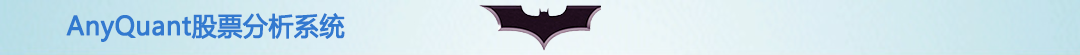
<style>
.page{position:relative;width:1080px;height:55px}
.page>*{position:absolute;margin:0}
.t1{font:25.5px "MicrosoftYaHei";color:#3279cf;font-weight:bold}
</style>
<div class="page">
<p class="t1" style="left:66px;top:13px;width:279px;height:29px">AnyQuant股票分析系统</p>
</div>
